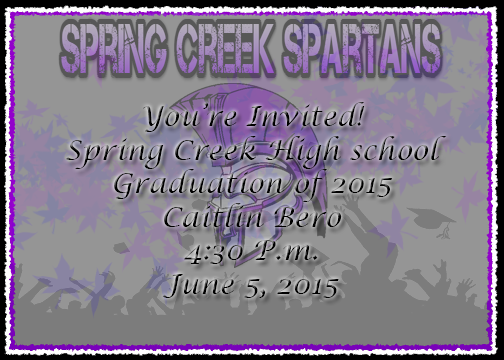
<style>
.page{position:relative;width:504px;height:360px}
.page>*{position:absolute;margin:0}
.t1{font:28px "LucidaCalligraphy-Italic"}
</style>
<div class="page">
<p class="t1" style="left:66px;top:102px;width:381px;height:196px;text-align:center">You’re Invited!<br>Spring Creek High school<br>Graduation of 2015<br>Caitlin Bero<br>4:30 P.m.<br>June 5, 2015</p>
</div>
